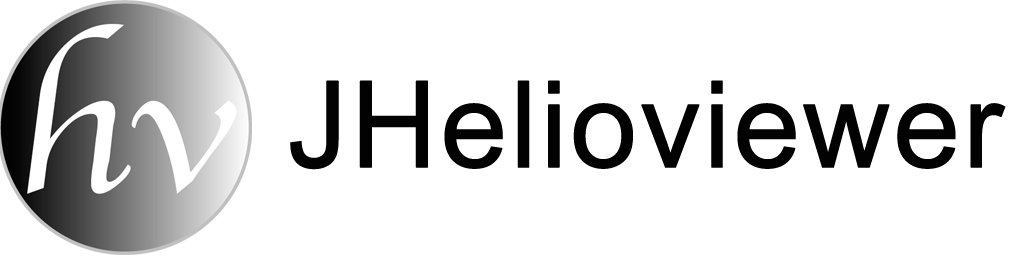
<style>
.page{position:relative;width:1024px;height:256px;background:#ffffff}
.page>*{position:absolute;margin:0}
.t1{font:120px "ArialMT";color:#020202;font-weight:bold}
</style>
<div class="page">
<p class="t1" style="left:290px;top:80px;width:716px;height:90px">JHelioviewer</p>
</div>
